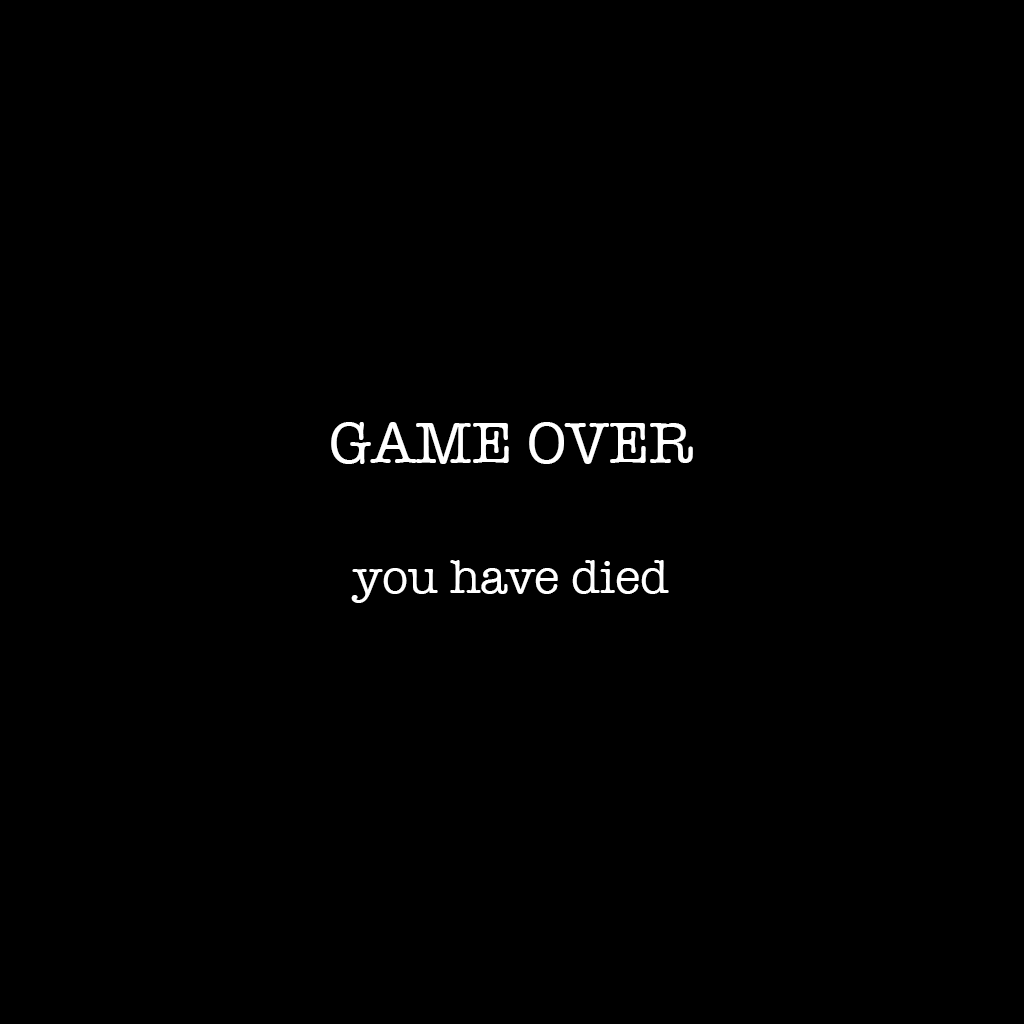
<style>
.page{position:relative;width:1024px;height:1024px;background:#000000}
.page>*{position:absolute;margin:0}
.t1{font:48px "AmericanTypewriter";color:#ffffff}
.t2{font:60px "AmericanTypewriter";color:#ffffff}
</style>
<div class="page">
<p class="t1" style="left:331px;top:422px;width:362px;height:181px;text-align:center"><span class="t2">GAME OVER<br><br></span>you have died</p>
</div>
